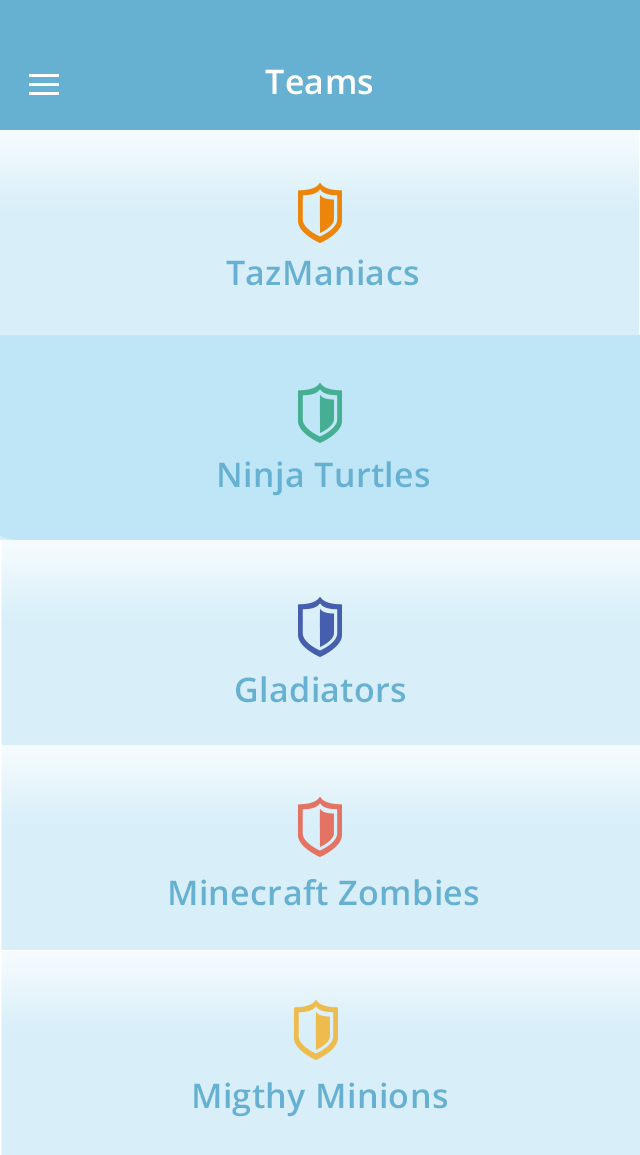
<style>
.page{position:relative;width:640px;height:1155px;background:#d8eff9}
.page>*{position:absolute;margin:0}
.t1{font:34px "OpenSans-Semibold";letter-spacing:0.01em;color:#ffffff}
.t2{font:34px "OpenSans-Semibold";letter-spacing:0.01em;color:#66b1d1}
</style>
<div class="page">
<p class="t1" style="left:265px;top:69px;width:107px;height:26px">Teams</p>
<p class="t2" style="left:226px;top:259px;width:192px;height:27px">TazManiacs</p>
<p class="t2" style="left:219px;top:461px;width:210px;height:35px">Ninja Turtles</p>
<p class="t2" style="left:236px;top:676px;width:169px;height:27px">Gladiators</p>
<p class="t2" style="left:170px;top:879px;width:308px;height:27px">Minecraft Zombies</p>
<p class="t2" style="left:194px;top:1082px;width:253px;height:35px">Migthy Minions</p>
</div>
